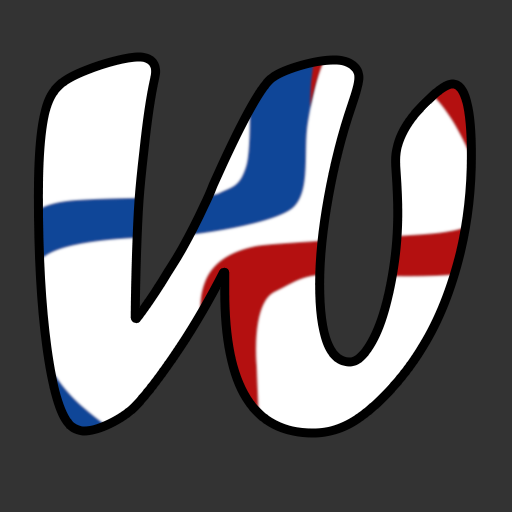
<style>
.page{position:relative;width:512px;height:512px;background:#333333}
.page>*{position:absolute;margin:0}
.t1{font:558.4px "ForteMT";letter-spacing:0.075em;color:#ffffff;text-transform:uppercase}
</style>
<div class="page">
<p class="t1" style="left:38px;top:56px;width:434px;height:377px">W</p>
</div>
